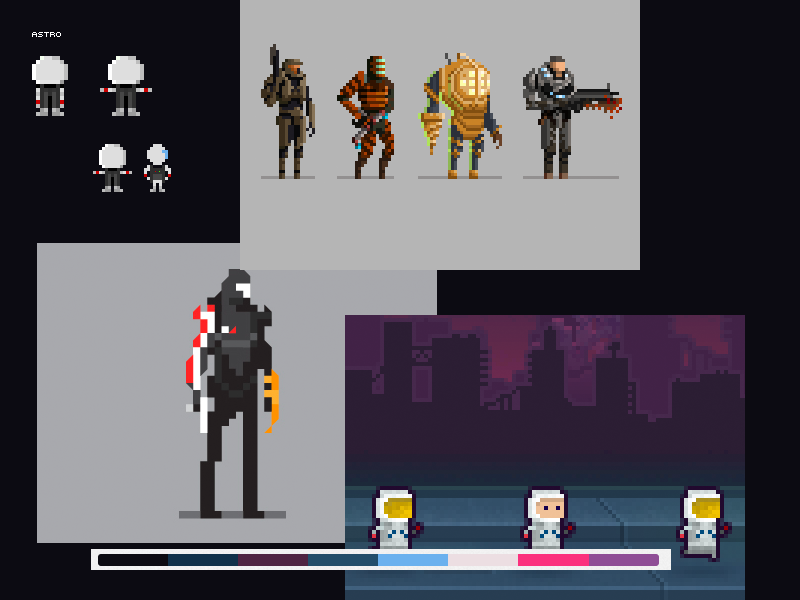
<style>
.page{position:relative;width:800px;height:600px;background:#0c0b12}
.page>*{position:absolute;margin:0}
.t1{font:8px "PFTempestaFive";color:#ffffff}
</style>
<div class="page">
<p class="t1" style="left:32px;top:32px;width:29px;height:5px">astro</p>
</div>
